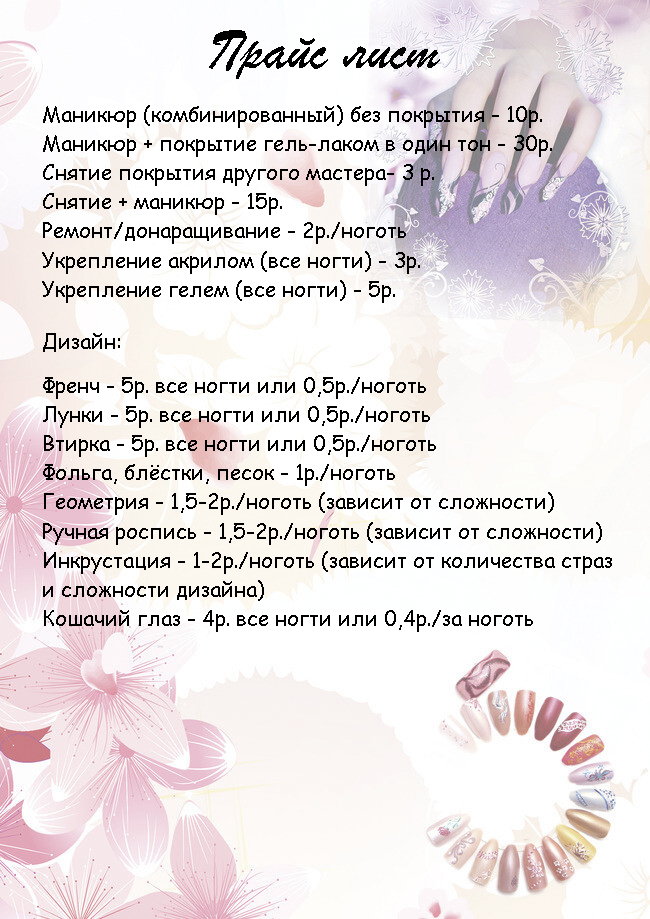
<style>
.page{position:relative;width:650px;height:919px}
.page>*{position:absolute;margin:0}
.t1{font:58.3px "BrushScriptMT";color:#000000}
.t2{font:20.8px/29.2px "ComicSansMS";color:#000000}
.t3{font:20.8px "ComicSansMS";color:#000000}
</style>
<div class="page">
<p class="t1" style="left:209px;top:30px;width:231px;height:49px">Прайс лист</p>
<p class="t2" style="left:42px;top:105px;width:510px;height:198px">Маникюр (комбинированный) без покрытия - 10р.<br>Маникюр + покрытие гель-лаком в один тон - 30р.<br>Снятие покрытия другого мастера- 3 р.<br>Снятие + маникюр - 15р.<br>Ремонт/донаращивание - 2р./ноготь<br>Укрепление акрилом (все ногти) - 3р.<br>Укрепление гелем (все ногти) - 5р.</p>
<p class="t3" style="left:43px;top:333px;width:77px;height:19px">Дизайн:</p>
<p class="t2" style="left:43px;top:377px;width:569px;height:255px">Френч - 5р. все ногти или 0,5р./ноготь<br>Лунки - 5р. все ногти или 0,5р./ноготь<br>Втирка - 5р. все ногти или 0,5р./ноготь<br>Фольга, блёстки, песок - 1р./ноготь<br>Геометрия - 1,5-2р./ноготь (зависит от сложности)<br>Ручная роспись - 1,5-2р./ноготь (зависит от сложности)<br>Инкрустация - 1-2р./ноготь (зависит от количества страз <br>и сложности дизайна)<br>Кошачий глаз - 4р. все ногти или 0,4р./за ноготь</p>
</div>
